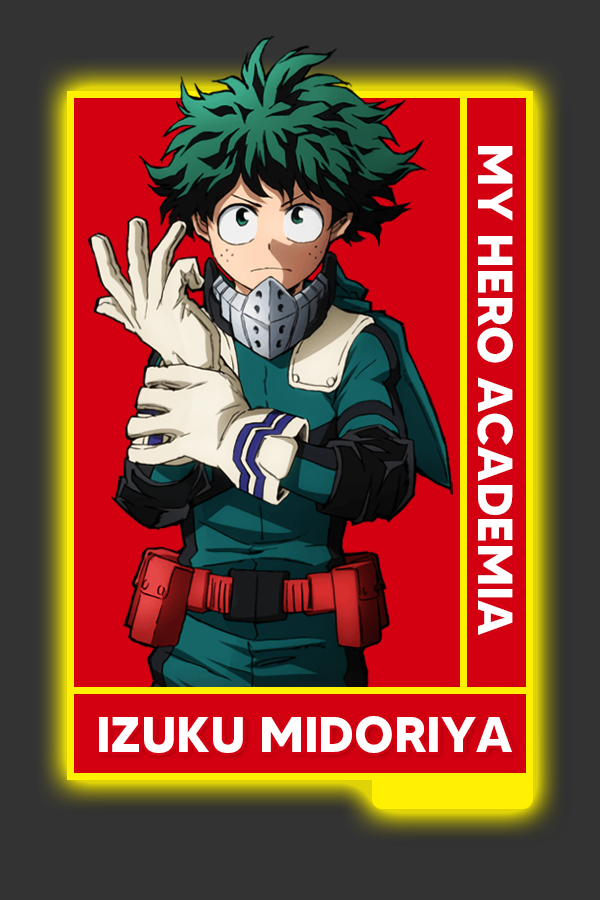
<style>
.page{position:relative;width:600px;height:900px;background:#333333}
.page>*{position:absolute;margin:0}
.t1{font:48.8px "MADETOMMY-Bold";color:#ffffff}
.t2{font:50.5px "MADETOMMY-Bold";color:#ffffff}
</style>
<div class="page">
<p class="t1" style="left:477px;top:146px;width:36px;height:489px;rotate:90deg">MY HERO ACADEMIA</p>
<p class="t2" style="left:99px;top:716px;width:413px;height:37px">IZUKU MIDORIYA</p>
</div>
